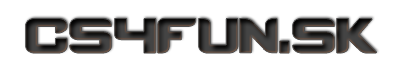
<style>
.page{position:relative;width:400px;height:70px;background:#ffffff}
.page>*{position:absolute;margin:0}
.t1{font:66.9px "Counter-StrikeRegular";letter-spacing:-0.01em;font-weight:bold;scale:0.88 1}
</style>
<div class="page">
<p class="t1" style="left:25px;top:18px;width:352px;height:35px">CS4FUN.SK</p>
</div>
